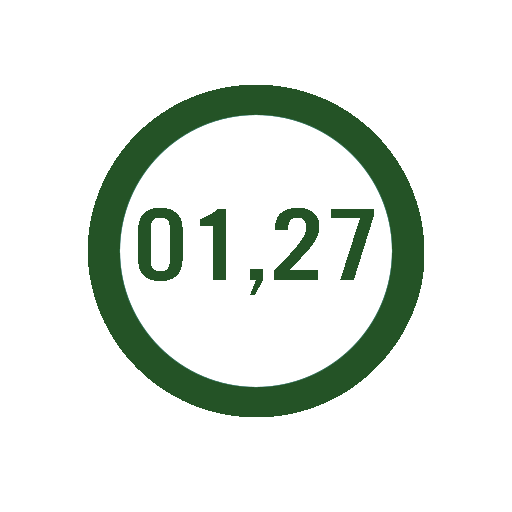
<style>
.page{position:relative;width:512px;height:512px;background:#ffffff}
.page>*{position:absolute;margin:0}
.t1{font:106.7px "UTM-Alter-Gothic";letter-spacing:0.01em;color:#245326;scale:1.25 1}
</style>
<div class="page">
<p class="t1" style="left:138px;top:208px;width:236px;height:87px">01,27</p>
</div>
